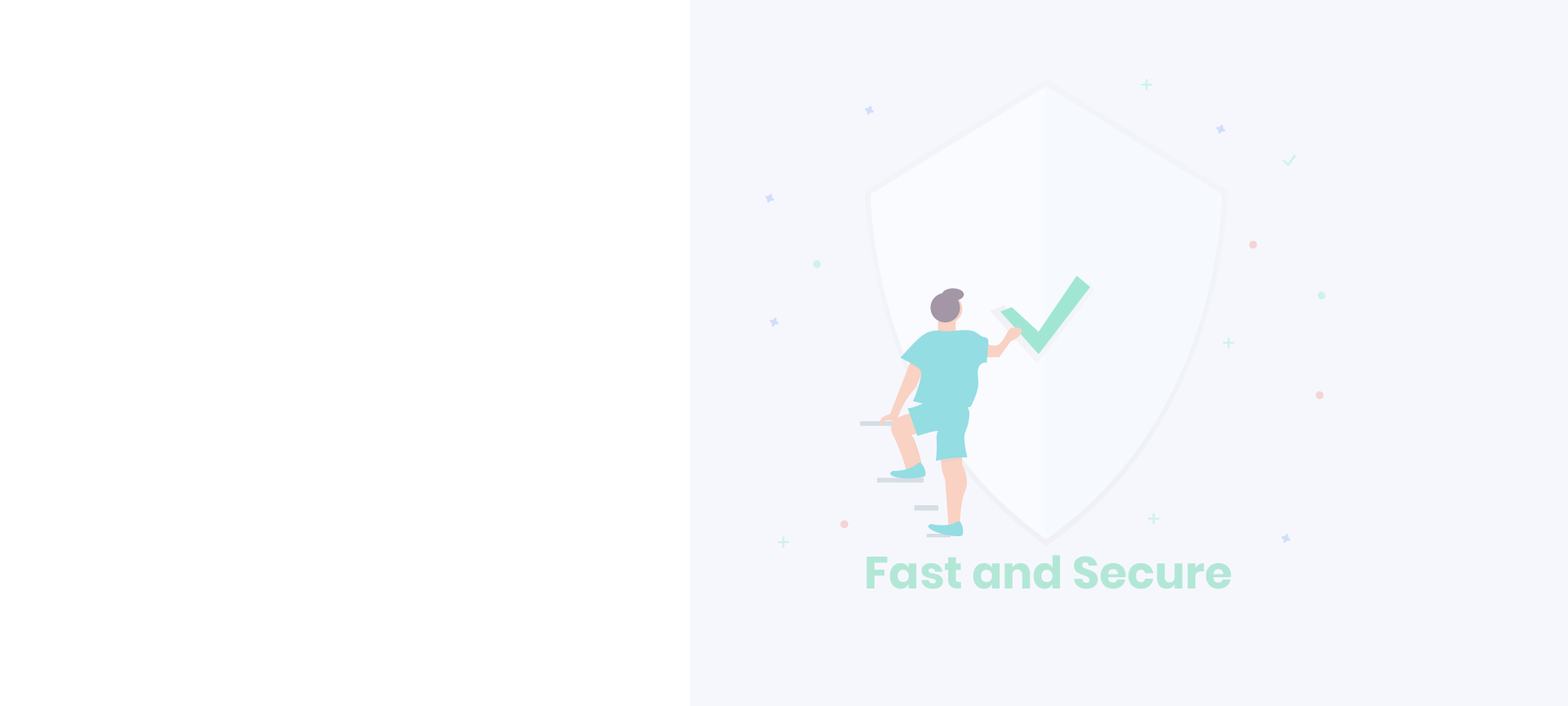
<style>
.page{position:relative;width:1568px;height:706px;background:#f6f7fd}
.page>*{position:absolute;margin:0}
.t1{font:44.9px "Poppins-Bold";color:#b2e7d6}
</style>
<div class="page">
<p class="t1" style="left:866px;top:555px;width:366px;height:35px">Fast and Secure</p>
</div>
